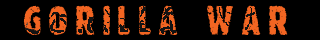
<style>
.page{position:relative;width:320px;height:40px;background:#000000}
.page>*{position:absolute;margin:0}
.t1{font:40px "Romeo-Regular";letter-spacing:0.2em;color:#f26522}
</style>
<div class="page">
<p class="t1" style="left:23px;top:5px;width:265px;height:30px">GORILLA WAR</p>
</div>
